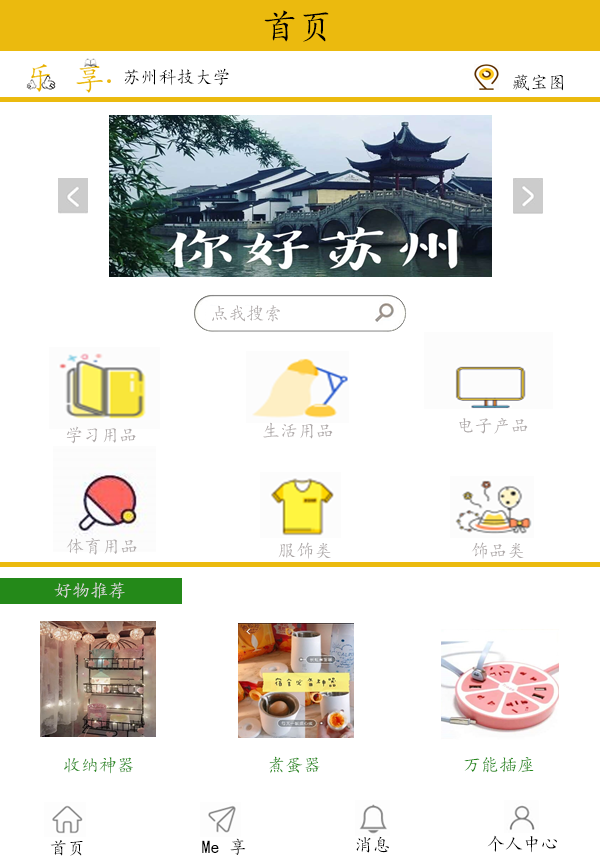
<style>
.page{position:relative;width:600px;height:858px;background:#ffffff}
.page>*{position:absolute;margin:0}
.t1{font:36px "KaiTi";color:#000000}
.t2{font:18px "KaiTi";color:#000000}
.t3{font:36px "KaiTi";color:#ebba0e}
.t4{font:18px "KaiTi";color:#aea9a9}
.t5{font:18px "KaiTi";color:#dfdddd}
.t6{font:18px "KaiTi";color:#248919}
</style>
<div class="page">
<p class="t1" style="left:264px;top:10px;width:65px;height:32px">首页</p>
<p class="t2" style="left:107px;top:68px;width:122px;height:18px"><span class="t3">.</span>苏州科技大学</p>
<p class="t2" style="left:513px;top:74px;width:50px;height:17px">藏宝图</p>
<p class="t4" style="left:212px;top:305px;width:68px;height:17px">点我搜索</p>
<p class="t4" style="left:263px;top:422px;width:70px;height:17px">生活用品</p>
<p class="t4" style="left:459px;top:418px;width:69px;height:16px">电子产品</p>
<p class="t4" style="left:66px;top:426px;width:70px;height:18px">学习用品</p>
<p class="t4" style="left:66px;top:538px;width:71px;height:17px">体育用品</p>
<p class="t4" style="left:278px;top:542px;width:53px;height:17px">服饰类</p>
<p class="t4" style="left:471px;top:542px;width:53px;height:17px">饰品类</p>
<p class="t5" style="left:54px;top:582px;width:71px;height:17px">好物推荐</p>
<p class="t6" style="left:64px;top:757px;width:69px;height:17px">收纳神器</p>
<p class="t6" style="left:269px;top:756px;width:51px;height:17px">煮蛋器</p>
<p class="t6" style="left:464px;top:757px;width:70px;height:16px">万能插座</p>
<p class="t2" style="left:50px;top:840px;width:33px;height:16px">首页</p>
<p class="t2" style="left:202px;top:838px;width:44px;height:17px">Me 享</p>
<p class="t2" style="left:356px;top:836px;width:33px;height:17px">消息</p>
<p class="t2" style="left:487px;top:835px;width:70px;height:18px">个人中心</p>
</div>
